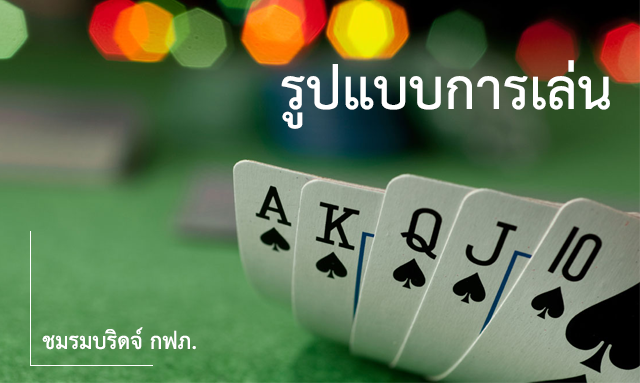
<style>
.page{position:relative;width:640px;height:383px}
.page>*{position:absolute;margin:0}
.t1{font:80px "THSarabunNew-Bold";color:#ffffff}
.t2{font:32px "THSarabunNew-Bold";color:#ffffff}
</style>
<div class="page">
<p class="t1" style="left:281px;top:60px;width:329px;height:69px">รูปแบบการเล่น</p>
<p class="t2" style="left:42px;top:327px;width:154px;height:23px">ชมรมบริดจ์ กฟภ.</p>
</div>
